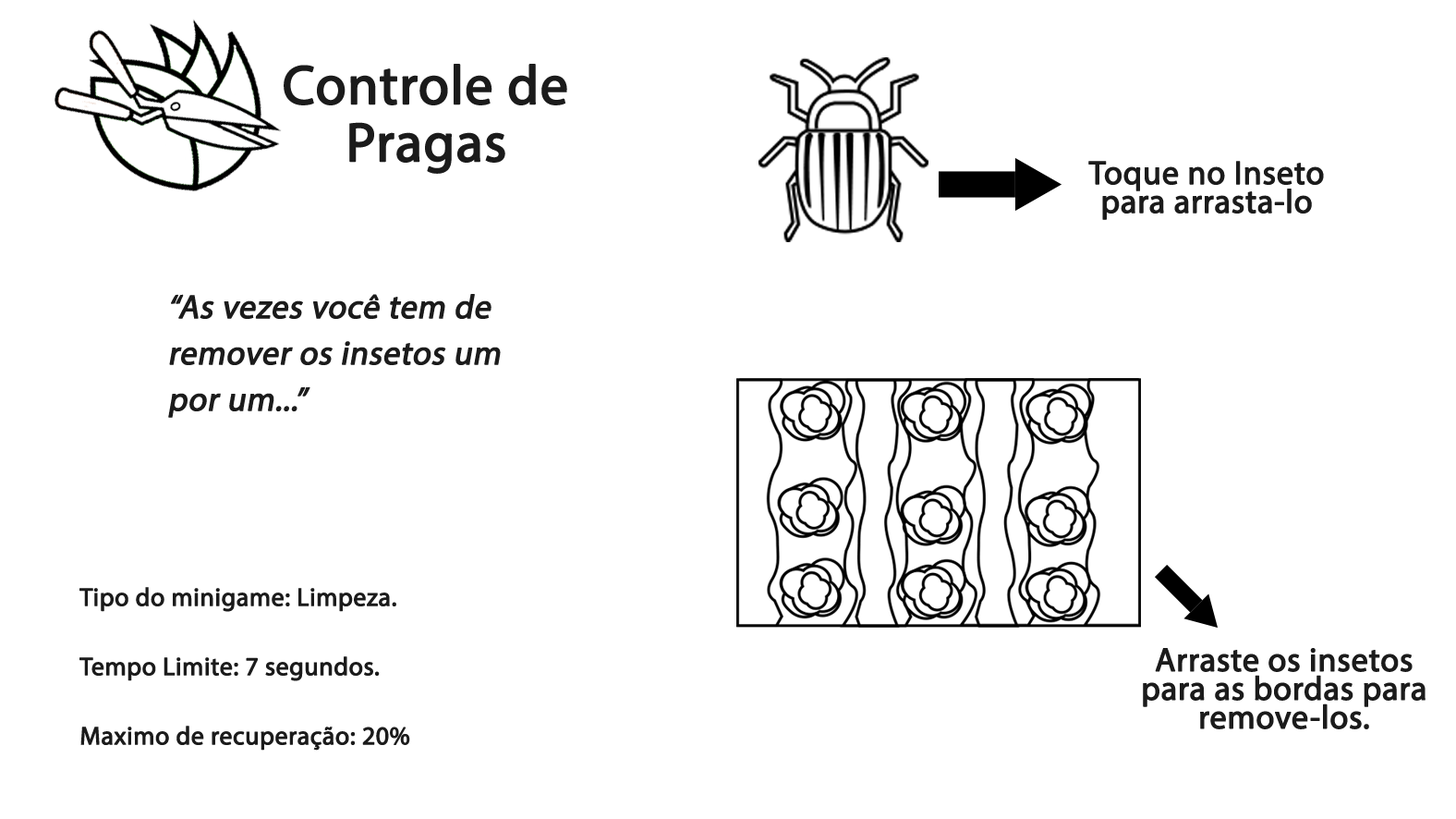
<style>
.page{position:relative;width:1456px;height:819px;background:#ffffff}
.page>*{position:absolute;margin:0}
.t1{font:55.4px "MyriadPro-Regular";color:#1b1b1b;font-weight:bold}
.t2{font:33.3px/28.6px "MyriadPro-Regular";color:#1b1b1b;font-weight:bold}
.t3{font:33.3px/46.2px "MyriadPro-Regular";color:#1b1b1b;font-weight:bold;font-style:italic}
.t4{font:25.5px/69.3px "MyriadPro-Regular";color:#1b1b1b;font-weight:bold}
</style>
<div class="page">
<p class="t1" style="left:284px;top:64px;width:283px;height:41px">Controle de</p>
<p class="t1" style="left:349px;top:122px;width:156px;height:52px">Pragas</p>
<p class="t2" style="left:1089px;top:161px;width:235px;height:59px;text-align:center">Toque no Inseto<br>para arrasta-lo</p>
<p class="t3" style="left:168px;top:294px;width:333px;height:124px">“As vezes você tem de remover os insetos um por um...”</p>
<p class="t4" style="left:79px;top:587px;width:331px;height:163px">Tipo do minigame: Limpeza.<br>Tempo Limite: 7 segundos.<br>Maximo de recuperação: 20%</p>
<p class="t2" style="left:1143px;top:648px;width:283px;height:81px;text-align:center">Arraste os insetos para as bordas para remove-los.</p>
</div>
